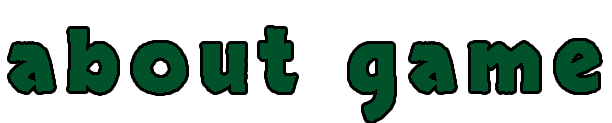
<style>
.page{position:relative;width:612px;height:123px;background:#ffffff}
.page>*{position:absolute;margin:0}
.t1{font:82px "Skranji-Bold";letter-spacing:0.15em;color:#01512b}
</style>
<div class="page">
<p class="t1" style="left:10px;top:28px;width:590px;height:94px">about game</p>
</div>
